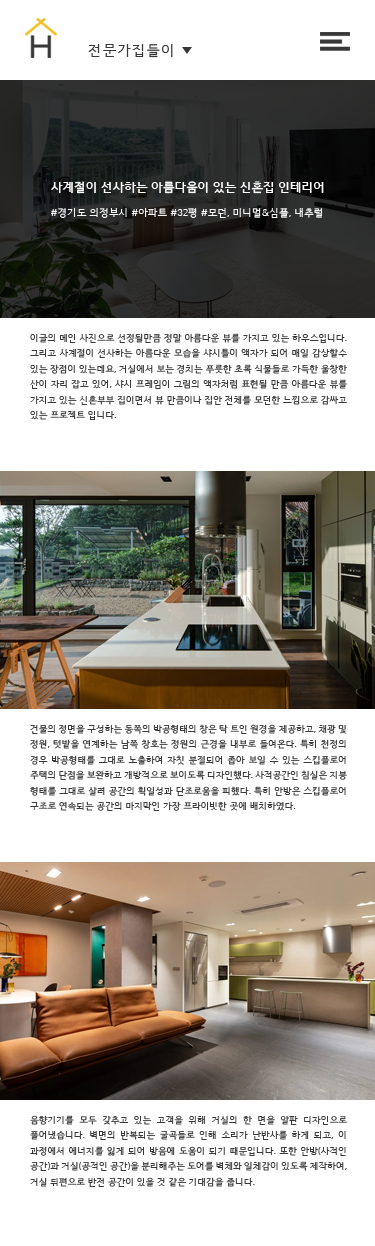
<style>
.page{position:relative;width:375px;height:1246px;background:#ffffff}
.page>*{position:absolute;margin:0}
.t1{font:14px "HCRDotum";letter-spacing:0.1em;color:#383838}
.t2{font:12px "HCRDotum-Bold";color:#ffffff}
.t3{font:10px "HCRDotum";color:#ffffff}
.t4{font:9px/15.4px "HCRDotum";color:#393939}
</style>
<div class="page">
<p class="t1" style="left:88px;top:44px;width:85px;height:14px">전문가집들이</p>
<p class="t2" style="left:51px;top:181px;width:273px;height:13px">사계절이 선사하는 아름다움이 있는 신혼집 인테리어</p>
<p class="t3" style="left:51px;top:208px;width:271px;height:10px">#경기도 의정부시 #아파트 #32평 #모던, 미니멀&amp;심플, 내추럴</p>
<p class="t4" style="left:30px;top:333px;width:317px;height:87px;text-align:justify">이글의 메인 사진으로 선정될만큼 정말 아름다운 뷰를 가지고 있는 하우스입니다. 그리고 사계절이 선사하는 아름다운 모습을 샤시틀이 액자가 되어 매일 감상할수 있는 장점이 있는데요, 거실에서 보는 경치는 푸릇한 초록 식물들로 가득한 울창한 산이 자리 잡고 있어, 샤시 프레임이 그림의 액자처럼 표현될 만큼 아름다운 뷰를 가지고 있는 신혼부부 집이면서 뷰 만큼이나 집안 전체를 모던한 느낌으로 감싸고 있는 프로젝트 입니다.</p>
<p class="t4" style="left:30px;top:724px;width:317px;height:87px;text-align:justify">건물의 정면을 구성하는 동쪽의 박공형태의 창은 탁 트인 원경을 제공하고, 채광 및 정원, 텃밭을 연계하는 남쪽 창호는 정원의 근경을 내부로 들여온다. 특히 천정의 경우 박공형태를 그대로 노출하여 자칫 분절되어 좁아 보일 수 있는 스킵플로어 주택의 단점을 보완하고 개방적으로 보이도록 디자인했다. 사적공간인 침실은 지붕 형태를 그대로 살려 공간의 획일성과 단조로움을 피했다. 특히 안방은 스킵플로어 구조로 연속되는 공간의 마지막인 가장 프라이빗한 곳에 배치하였다.</p>
<p class="t4" style="left:30px;top:1115px;width:317px;height:72px;text-align:justify">음향기기를 모두 갖추고 있는 고객을 위해 거실의 한 면을 알판 디자인으로 풀어냈습니다. 벽면의 반복되는 굴곡들로 인해 소리가 난반사를 하게 되고, 이 과정에서 에너지를 잃게 되어 방음에 도움이 되기 때문입니다. 또한 안방(사적인 공간)과 거실(공적인 공간)을 분리해주는 도어를 벽체와 일체감이 있도록 제작하여, 거실 뒤편으로 반전 공간이 있을 것 같은 기대감을 줍니다.</p>
</div>
